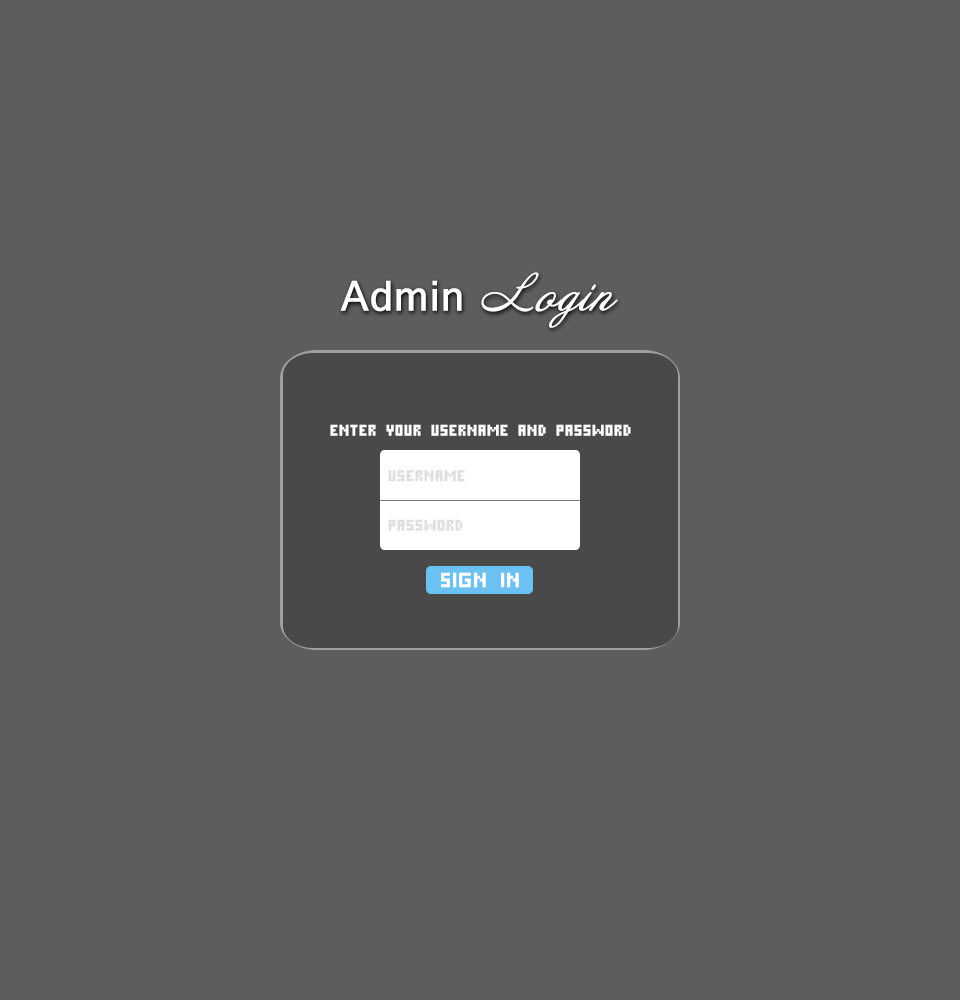
<style>
.page{position:relative;width:960px;height:1000px;background:#5d5d5d}
.page>*{position:absolute;margin:0}
.t1{font:45.7px "Raavi";color:#ffffff;font-weight:bold}
.t2{font:45.7px "Annabelle";color:#ffffff;font-weight:bold}
.t3{font:15.2px "PixelCyr-Normal";color:#ffffff;font-weight:bold}
.t4{font:15.2px "PixelCyr-Normal";color:#dfdfdf;font-weight:bold}
.t5{font:20.3px "PixelCyr-Normal";color:#ffffff;font-weight:bold}
</style>
<div class="page">
<p class="t1" style="left:340px;top:272px;width:278px;height:56px">Admin <span class="t2">Login</span></p>
<p class="t3" style="left:330px;top:424px;width:301px;height:12px">Enter your Username and Password</p>
<p class="t4" style="left:388px;top:470px;width:77px;height:12px">Username</p>
<p class="t4" style="left:388px;top:519px;width:75px;height:12px">Password</p>
<p class="t5" style="left:441px;top:572px;width:78px;height:16px">Sign In</p>
</div>
